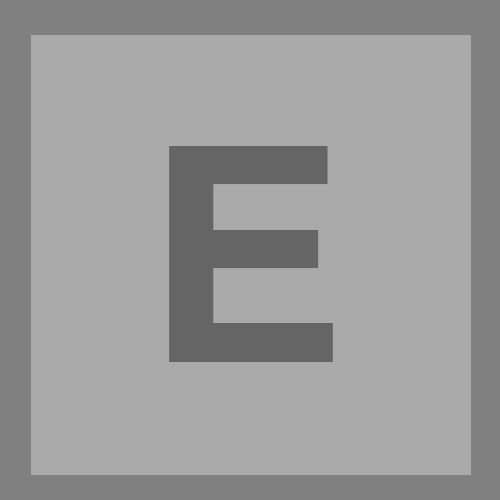
<style>
.page{position:relative;width:500px;height:500px;background:#aaaaaa}
.page>*{position:absolute;margin:0}
.t1{font:300px "Helvetica-Bold";color:#656565}
</style>
<div class="page">
<p class="t1" style="left:169px;top:146px;width:164px;height:216px">E</p>
</div>
